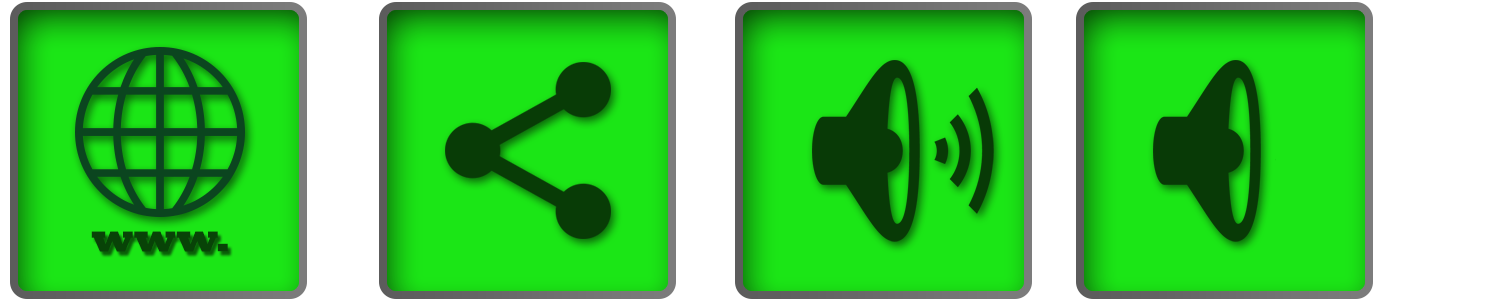
<style>
.page{position:relative;width:1500px;height:300px;background:#1be616}
.page>*{position:absolute;margin:0}
.t1{font:41.7px "Rockwell-ExtraBold";color:#084307}
</style>
<div class="page">
<p class="t1" style="left:91px;top:231px;width:137px;height:21px">www.</p>
</div>
